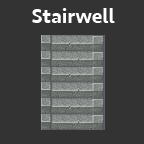
<style>
.page{position:relative;width:144px;height:144px;background:#333333}
.page>*{position:absolute;margin:0}
.t1{font:20.8px "Seravek-Medium";color:#ffffff}
</style>
<div class="page">
<p class="t1" style="left:32px;top:8px;width:83px;height:15px">Stairwell</p>
</div>
